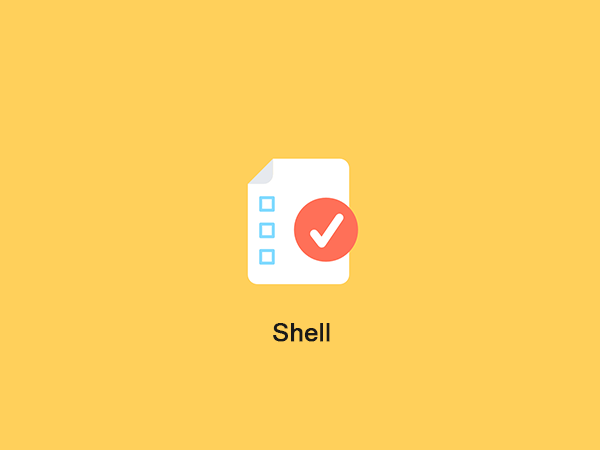
<style>
.page{position:relative;width:600px;height:450px;background:#ffd05b}
.page>*{position:absolute;margin:0}
.t1{font:25px "ArialMT";color:#191919;font-weight:bold}
</style>
<div class="page">
<p class="t1" style="left:273px;top:323px;width:57px;height:19px">Shell</p>
</div>
